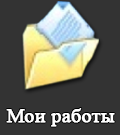
<style>
.page{position:relative;width:120px;height:135px;background:#333333}
.page>*{position:absolute;margin:0}
.t1{font:19.8px "TimesNewRomanPSMT";color:#ffffff;font-weight:bold}
</style>
<div class="page">
<p class="t1" style="left:6px;top:108px;width:109px;height:19px">Мои работы</p>
</div>
